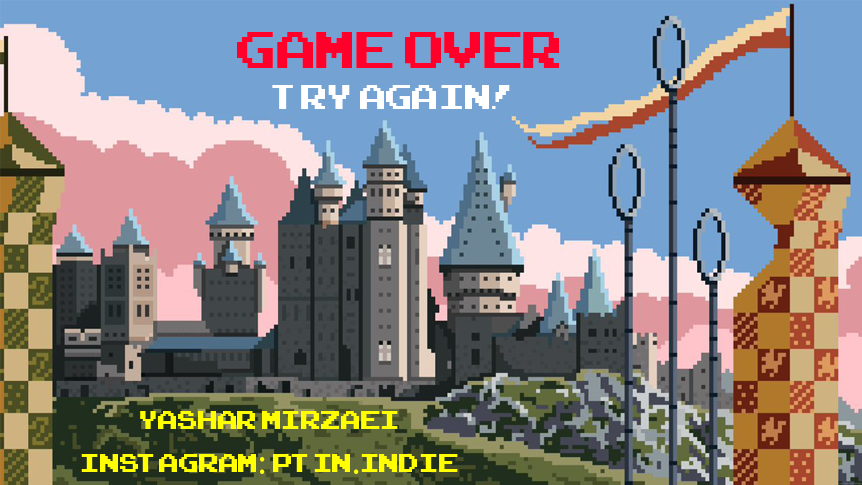
<style>
.page{position:relative;width:862px;height:485px;background:#74a2d3}
.page>*{position:absolute;margin:0}
.t1{font:72px "ArcadeClassic";color:#ff002a}
.t2{font:48px "ArcadeClassic";color:#ffffff}
.t3{font:36px "ArcadeClassic";color:#ffff00}
.t4{font:36px "MyriadPro-Regular";color:#ffff00}
</style>
<div class="page">
<p class="t1" style="left:237px;top:32px;width:322px;height:36px">game Over</p>
<p class="t2" style="left:272px;top:85px;width:238px;height:24px">Try Again!</p>
<p class="t3" style="left:81px;top:411px;width:377px;height:63px;text-align:center">Yashar Mirzaei<br>Instagram<span class="t4">: </span>ptin<span class="t4">.</span>indie</p>
</div>
